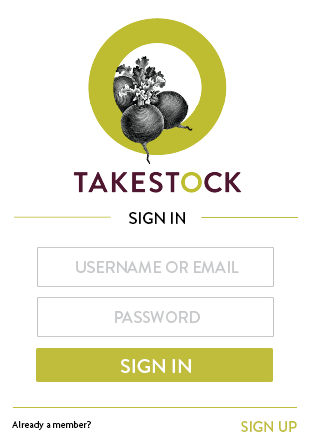
<style>
.page{position:relative;width:312px;height:445px;background:#ffffff}
.page>*{position:absolute;margin:0}
.t1{font:16px "BrandonGrotesque-Medium";color:#000000}
.t2{font:16px "BrandonGrotesque-Medium";color:#c7c8ca}
.t3{font:20px "BrandonGrotesque-Medium";color:#ffffff}
.t4{font:10px "Agenda-Medium";color:#000000}
.t5{font:14.6px "BrandonGrotesque-Medium";color:#c0bd3d}
</style>
<div class="page">
<p class="t1" style="left:129px;top:212px;width:56px;height:12px">SIGN IN</p>
<p class="t2" style="left:76px;top:261px;width:163px;height:12px">USERNAME OR EMAIL</p>
<p class="t2" style="left:115px;top:311px;width:85px;height:12px">PASSWORD</p>
<p class="t3" style="left:121px;top:359px;width:70px;height:14px">SIGN IN</p>
<p class="t4" style="left:12px;top:421px;width:79px;height:10px">Already a member?</p>
<p class="t5" style="left:241px;top:421px;width:56px;height:11px">SIGN UP</p>
</div>
